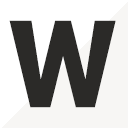
<style>
.page{position:relative;width:128px;height:128px;background:#ffffff}
.page>*{position:absolute;margin:0}
.t1{font:120px "Industry-Black";color:#2b2a28;text-transform:uppercase}
</style>
<div class="page">
<p class="t1" style="left:9px;top:20px;width:107px;height:88px">W</p>
</div>
